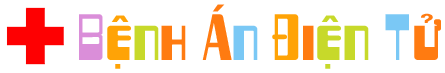
<style>
.page{position:relative;width:445px;height:73px;background:#ffffff}
.page>*{position:absolute;margin:0}
.t1{font:62.5px "VfFree35";color:#ff7b11;scale:0.95 1}
.t2{font:62.5px "VfFree35";color:#da8ed9;scale:0.95 1}
.t3{font:62.5px "VfFree35";color:#ffa306;scale:0.95 1}
.t4{font:62.5px "VfFree35";color:#c7d92a;scale:0.95 1}
.t5{font:62.5px "VfFree35";color:#7ac8f5;scale:0.95 1}
</style>
<div class="page">
<p class="t1" style="left:79px;top:4px;width:362px;height:65px"><span class="t2">B</span><span class="t3">eä</span><span class="t4">n</span>h AÙ<span class="t5">n </span><span class="t3">Ñ</span>i<span class="t4">eän </span><span class="t5">T</span>öû</p>
</div>
